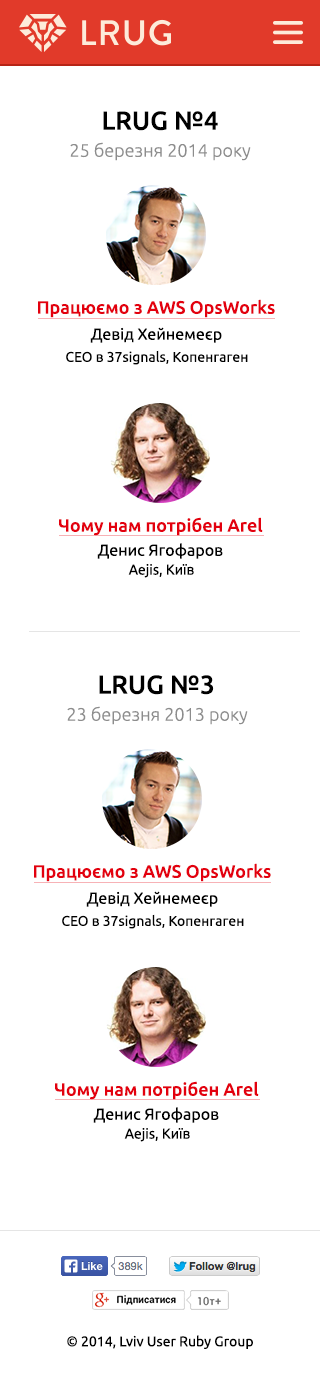
<style>
.page{position:relative;width:320px;height:1380px;background:#ffffff}
.page>*{position:absolute;margin:0}
.t1{font:26px "Ubuntu-Medium";color:#000000}
.t2{font:18px "Ubuntu-Light";color:#8d8d8d}
.t3{font:18px "Ubuntu-Medium";color:#e3000e}
.t4{font:16px "Ubuntu";color:#000000}
.t5{font:13.9px "Ubuntu";color:#010101}
.t6{font:14.4px "Ubuntu";color:#000000}
.t7{font:14px "Ubuntu";color:#000000}
</style>
<div class="page">
<p class="t1" style="left:103px;top:111px;width:115px;height:20px">LRUG №4</p>
<p class="t2" style="left:70px;top:142px;width:181px;height:19px">25 березня 2014 року</p>
<p class="t3" style="left:38px;top:299px;width:237px;height:19px">Працюємо з AWS OpsWorks</p>
<p class="t4" style="left:90px;top:327px;width:132px;height:16px">Девід Хейнемеєр</p>
<p class="t5" style="left:66px;top:350px;width:182px;height:15px">CEO в 37signals, Копенгаген</p>
<p class="t3" style="left:59px;top:517px;width:204px;height:19px">Чому нам потрібен Arel</p>
<p class="t4" style="left:97px;top:543px;width:126px;height:16px">Денис Ягофаров</p>
<p class="t6" style="left:128px;top:564px;width:66px;height:14px">Aejis, Київ</p>
<p class="t1" style="left:99px;top:675px;width:115px;height:20px">LRUG №3</p>
<p class="t2" style="left:67px;top:706px;width:181px;height:19px">23 березня 2013 року</p>
<p class="t3" style="left:34px;top:863px;width:237px;height:19px">Працюємо з AWS OpsWorks</p>
<p class="t4" style="left:86px;top:891px;width:132px;height:16px">Девід Хейнемеєр</p>
<p class="t5" style="left:62px;top:914px;width:182px;height:15px">CEO в 37signals, Копенгаген</p>
<p class="t3" style="left:55px;top:1081px;width:204px;height:19px">Чому нам потрібен Arel</p>
<p class="t4" style="left:93px;top:1107px;width:126px;height:16px">Денис Ягофаров</p>
<p class="t6" style="left:124px;top:1128px;width:66px;height:14px">Aejis, Київ</p>
<p class="t7" style="left:67px;top:1335px;width:186px;height:14px">© 2014, Lviv User Ruby Group</p>
</div>
